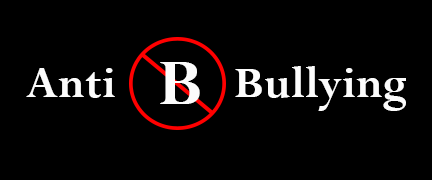
<style>
.page{position:relative;width:432px;height:180px;background:#000000}
.page>*{position:absolute;margin:0}
.t1{font:48px "Perpetua-Bold";color:#fcfcfc}
</style>
<div class="page">
<p class="t1" style="left:26px;top:66px;width:380px;height:45px">Anti           Bullying</p>
</div>
